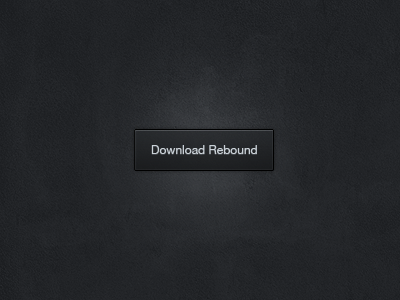
<style>
.page{position:relative;width:400px;height:300px}
.page>*{position:absolute;margin:0}
.t1{font:12px "HelveticaNeue";color:#cad1d7}
</style>
<div class="page">
<p class="t1" style="left:151px;top:145px;width:106px;height:9px">Download Rebound</p>
</div>
